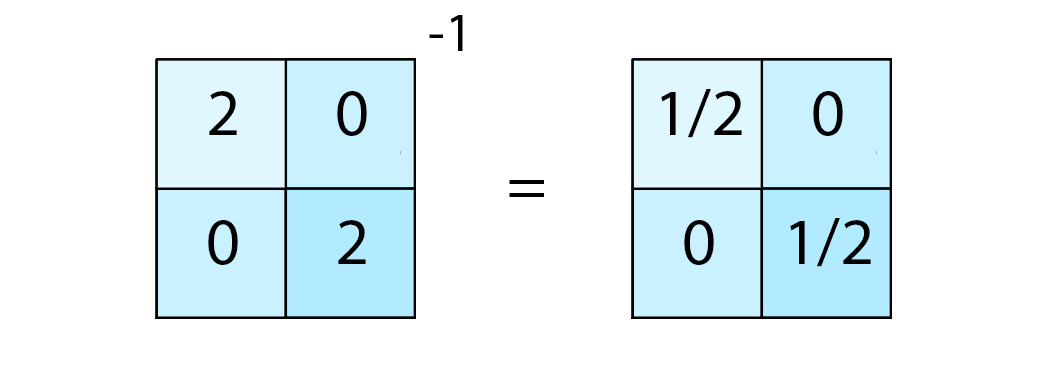
<style>
.page{position:relative;width:1050px;height:375px;background:#ffffff}
.page>*{position:absolute;margin:0}
.t1{font:54.2px "MyriadPro-Regular";color:#000000}
.t2{font:66.7px "MyriadPro-Regular";color:#000000}
</style>
<div class="page">
<p class="t1" style="left:429px;top:15px;width:34px;height:36px">-1</p>
<p class="t2" style="left:661px;top:89px;width:81px;height:49px">1/2</p>
<p class="t2" style="left:209px;top:91px;width:28px;height:44px">2</p>
<p class="t2" style="left:337px;top:91px;width:30px;height:45px">0</p>
<p class="t2" style="left:813px;top:91px;width:30px;height:45px">0</p>
<p class="t2" style="left:509px;top:180px;width:35px;height:17px">=</p>
<p class="t2" style="left:208px;top:220px;width:30px;height:45px">0</p>
<p class="t2" style="left:338px;top:220px;width:28px;height:44px">2</p>
<p class="t2" style="left:684px;top:220px;width:30px;height:45px">0</p>
<p class="t2" style="left:790px;top:218px;width:81px;height:49px">1/2</p>
</div>
